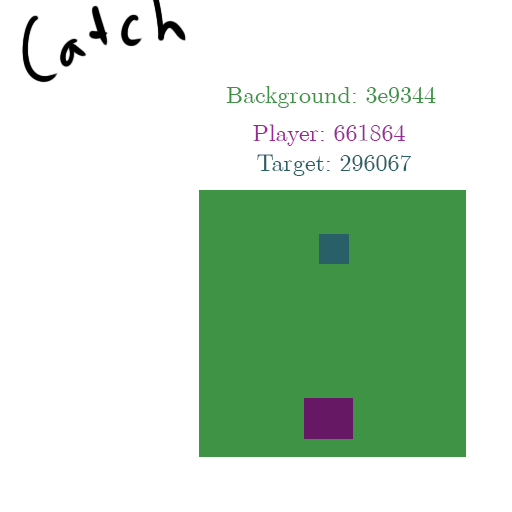
<style>
.page{position:relative;width:512px;height:512px;background:#ffffff}
.page>*{position:absolute;margin:0}
.t1{font:24px "Euclid";color:#3e9344}
.t2{font:24px "Euclid";color:#9b2a98}
.t3{font:24px "Euclid";color:#296067}
</style>
<div class="page">
<p class="t1" style="left:226px;top:86px;width:210px;height:22px">Background: 3e9344</p>
<p class="t2" style="left:253px;top:124px;width:152px;height:22px">Player: 661864</p>
<p class="t3" style="left:257px;top:154px;width:155px;height:22px">Target: 296067</p>
</div>
